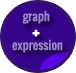
<style>
.page{position:relative;width:76px;height:73px;background:#36048a}
.page>*{position:absolute;margin:0}
.t1{font:12px "Oswald-Regular";color:#a38cc9}
.t2{font:24px "Oswald-Regular";color:#ffffff}
</style>
<div class="page">
<p class="t1" style="left:12px;top:10px;width:51px;height:43px;text-align:center">graph<br>                  <br> expression</p>
<p class="t2" style="left:32px;top:29px;width:8px;height:8px">+</p>
</div>
